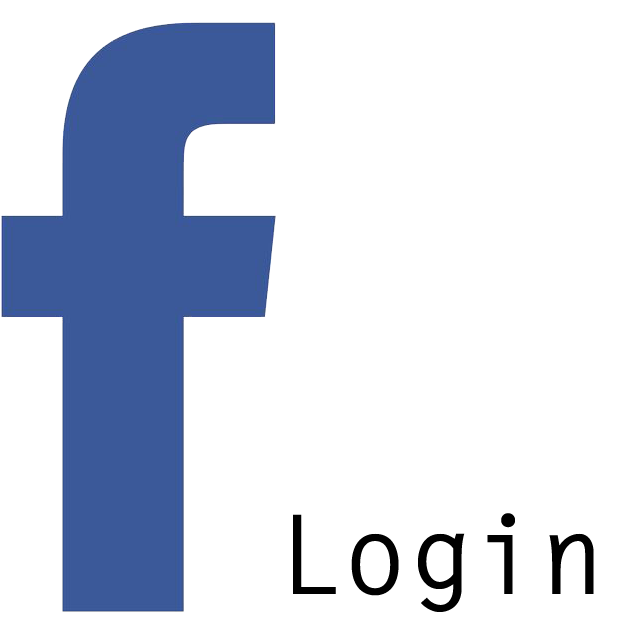
<style>
.page{position:relative;width:634px;height:634px;background:#ffffff}
.page>*{position:absolute;margin:0}
.t1{font:110px "LetterGothicStd-Bold";color:#000000}
</style>
<div class="page">
<p class="t1" style="left:293px;top:513px;width:301px;height:99px">Login</p>
</div>
